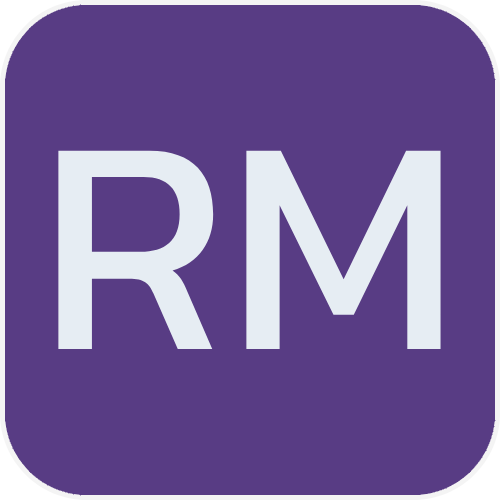
<style>
.page{position:relative;width:500px;height:500px;background:#583c84}
.page>*{position:absolute;margin:0}
.t1{font:307.7px "Kanit-Regular";color:#e6edf3}
</style>
<div class="page">
<p class="t1" style="left:58px;top:150px;width:383px;height:199px">RM</p>
</div>
